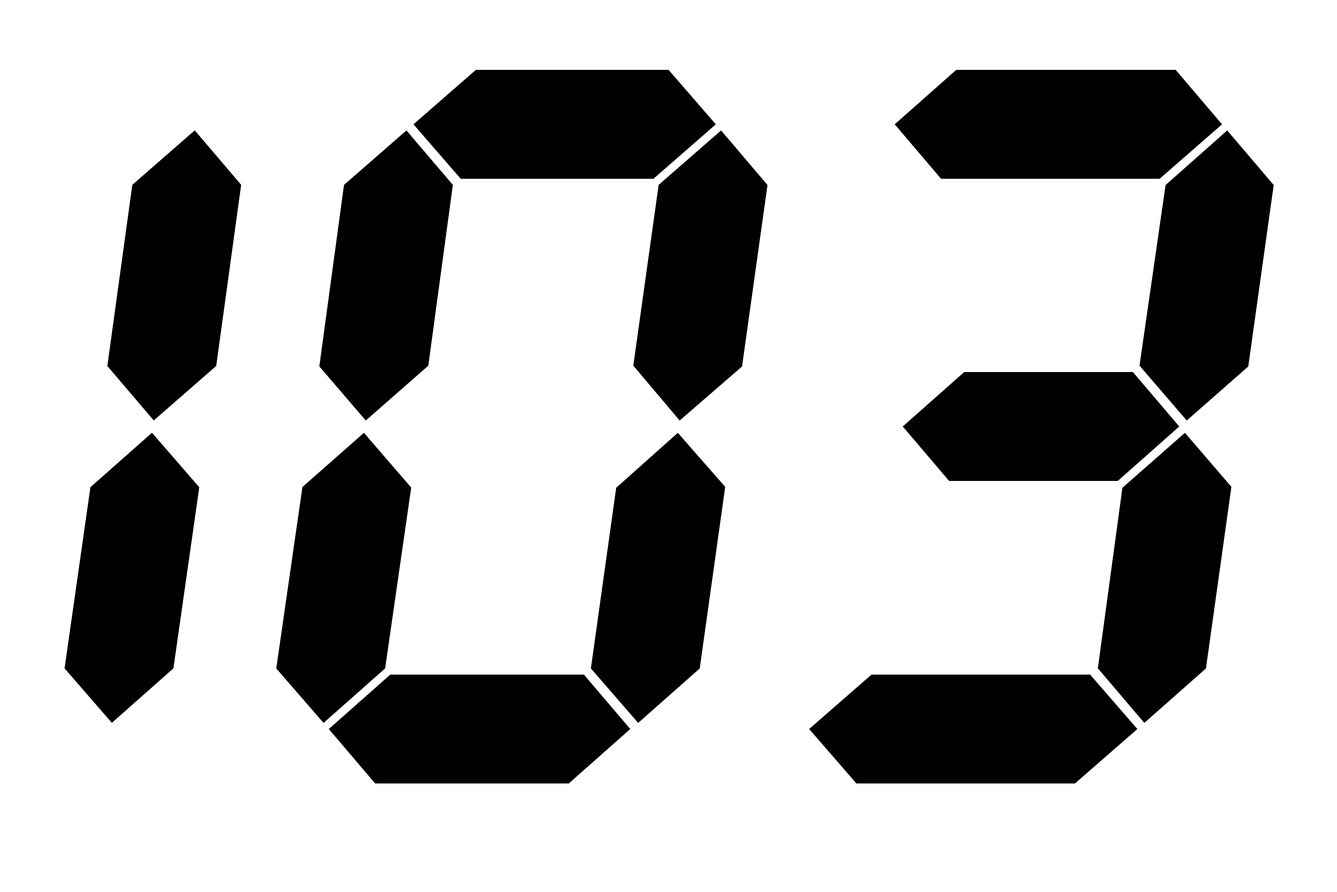
<style>
.page{position:relative;width:1337px;height:892px;background:#ffffff}
.page>*{position:absolute;margin:0}
.t1{font:891.6px "MouseLEDU";letter-spacing:0.05em;color:#000000}
</style>
<div class="page">
<p class="t1" style="left:65px;top:70px;width:1209px;height:713px">103</p>
</div>
